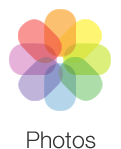
<style>
.page{position:relative;width:121px;height:149px;background:#ffffff}
.page>*{position:absolute;margin:0}
.t1{font:23px "HelveticaNeue-Light";color:#333333}
</style>
<div class="page">
<p class="t1" style="left:27px;top:131px;width:69px;height:18px">Photos</p>
</div>
